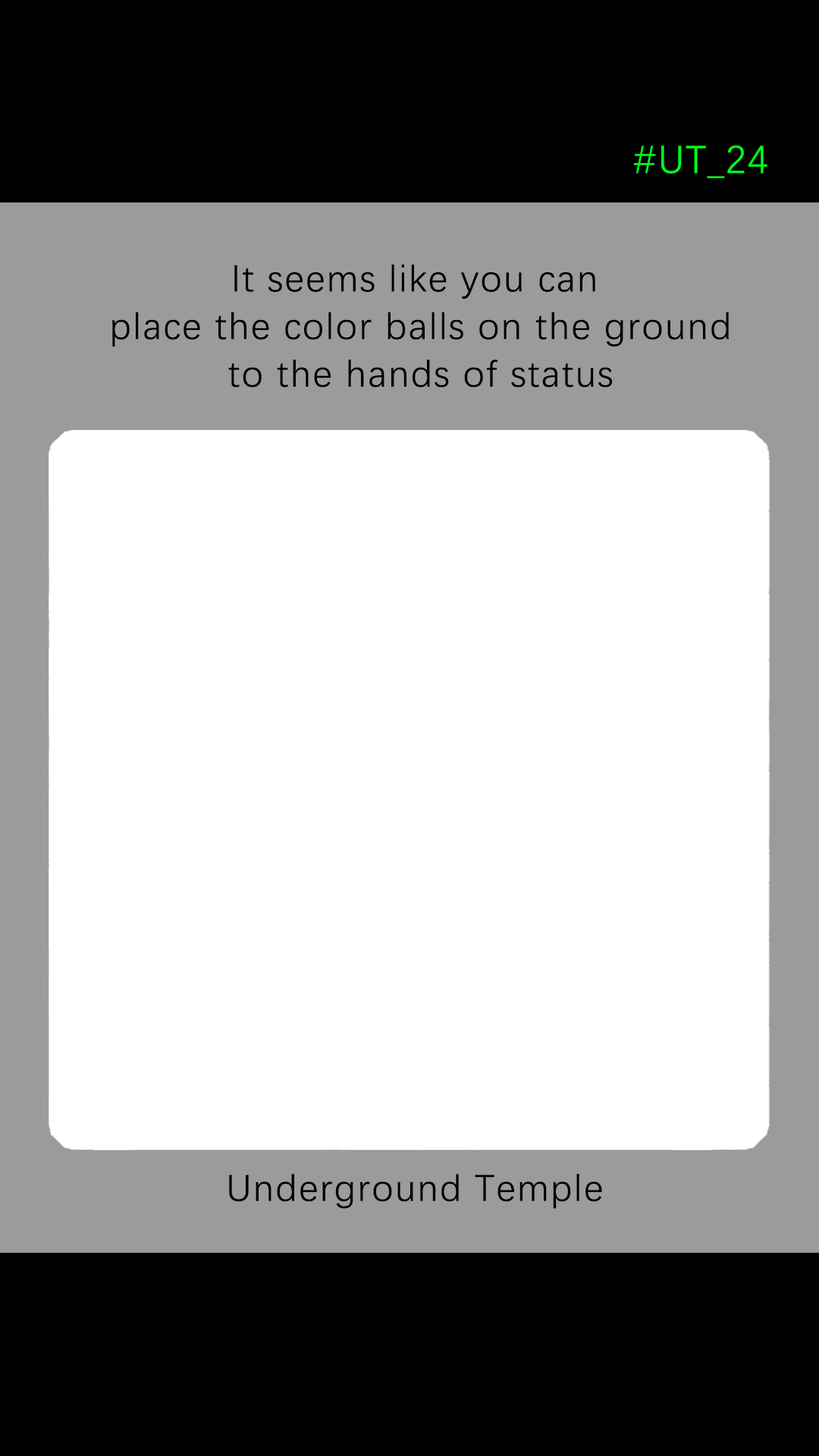
<style>
.page{position:relative;width:819px;height:1456px;background:#ffffff}
.page>*{position:absolute;margin:0}
.t1{font:39.2px "DengXian-Regular";letter-spacing:0.04em;color:#00ff1e}
.t2{font:37.9px/47.6px "DengXian-Regular";letter-spacing:0.04em;color:#000000}
.t3{font:37.9px "DengXian-Regular";letter-spacing:0.04em;color:#000000}
</style>
<div class="page">
<p class="t1" style="left:634px;top:145px;width:133px;height:33px">#UT_24</p>
<p class="t2" style="left:112px;top:264px;width:617px;height:124px;text-align:center">It seems like you can<br> place the color balls on the ground<br> to the hands of status</p>
<p class="t3" style="left:229px;top:1174px;width:373px;height:35px">Underground Temple</p>
</div>
